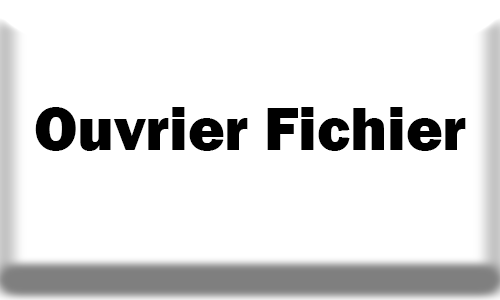
<style>
.page{position:relative;width:500px;height:300px;background:#ffffff}
.page>*{position:absolute;margin:0}
.t1{font:62.5px "FranklinGothic-Heavy";color:#000000}
</style>
<div class="page">
<p class="t1" style="left:35px;top:107px;width:431px;height:44px">Ouvrier Fichier</p>
</div>
